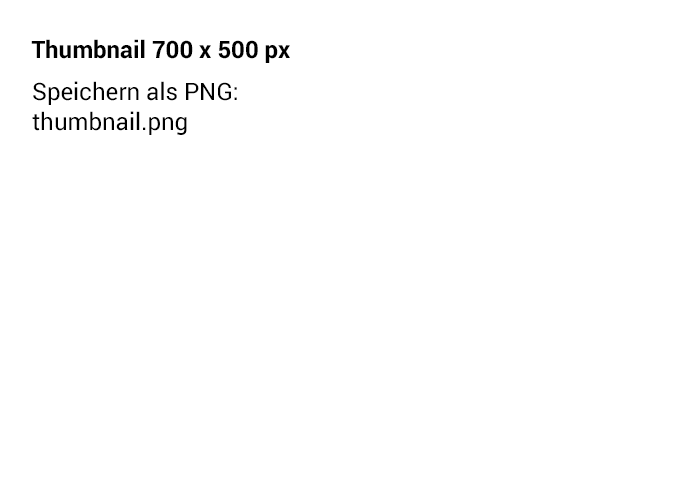
<style>
.page{position:relative;width:700px;height:500px;background:#ffffff}
.page>*{position:absolute;margin:0}
.t1{font:24px "Roboto-Bold";color:#000000}
.t2{font:24px/30px "Roboto-Regular";color:#000000}
</style>
<div class="page">
<p class="t1" style="left:31px;top:39px;width:259px;height:24px">Thumbnail 700 x 500 px</p>
<p class="t2" style="left:32px;top:81px;width:205px;height:54px">Speichern als PNG:<br>thumbnail.png</p>
</div>
